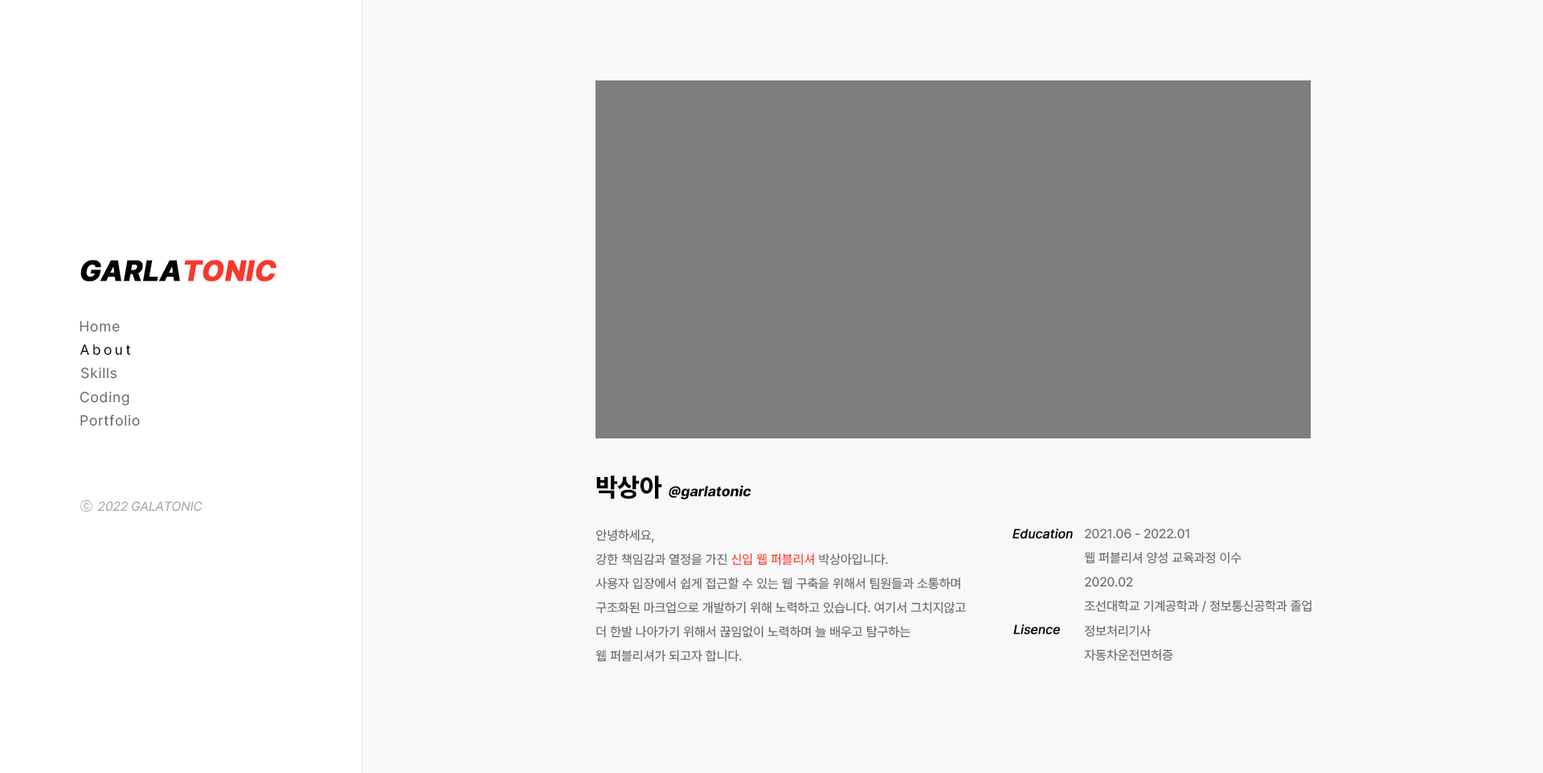
<style>
.page{position:relative;width:1543px;height:773px;background:#f8f8f8}
.page>*{position:absolute;margin:0}
.t1{font:28.9px "Pretendard-ExtraBold";color:#000000;font-weight:bold;font-style:italic}
.t2{font:28.9px "Pretendard-ExtraBold";color:#f9372d;font-weight:bold;font-style:italic}
.t3{font:14.5px "Pretendard-Regular";letter-spacing:0.05em;color:#666666}
.t4{font:14.5px "Pretendard-Regular";letter-spacing:0.2em;color:#000000}
.t5{font:14.5px "Pretendard-ExtraBold";color:#000000;font-style:italic}
.t6{font:25.7px "Pretendard-ExtraBold";color:#000000}
.t7{font:12.9px "Pretendard-Regular";color:#aaaaaa;font-style:italic}
.t8{font:12.9px "Gulim";color:#aaaaaa}
.t9{font:12.9px/24.1px "Pretendard-Regular";color:#666666}
.t10{font:12.9px/24.1px "Pretendard-Regular";color:#f9372d}
.t11{font:12.9px "Pretendard-Regular";color:#000000;font-weight:bold;font-style:italic}
</style>
<div class="page">
<p class="t1" style="left:80px;top:260px;width:197px;height:21px">GARLA<span class="t2">TONIC</span></p>
<p class="t3" style="left:80px;top:321px;width:40px;height:11px">Home</p>
<p class="t4" style="left:80px;top:344px;width:51px;height:11px">About</p>
<p class="t3" style="left:81px;top:367px;width:36px;height:12px">Skills</p>
<p class="t3" style="left:80px;top:391px;width:49px;height:14px">Coding</p>
<p class="t3" style="left:80px;top:414px;width:60px;height:12px">Portfolio</p>
<p class="t5" style="left:596px;top:475px;width:156px;height:24px"><span class="t6">박상아 </span>@garlatonic</p>
<p class="t7" style="left:80px;top:500px;width:123px;height:11px"><span class="t8">ⓒ </span>2022 GALATONIC</p>
<p class="t9" style="left:596px;top:529px;width:370px;height:133px">안녕하세요,<br>강한 책임감과 열정을 가진 <span class="t10">신입 웹 퍼블리셔</span> 박상아입니다.<br>사용자 입장에서 쉽게 접근할 수 있는 웹 구축을 위해서 팀원들과 소통하며<br>구조화된 마크업으로 개발하기 위해 노력하고 있습니다. 여기서 그치지않고<br>더 한발 나아가기 위해서 끊임없이 노력하며 늘 배우고 탐구하는<br>웹 퍼블리셔가 되고자 합니다.</p>
<p class="t11" style="left:1013px;top:528px;width:60px;height:11px">Education</p>
<p class="t9" style="left:1084px;top:528px;width:228px;height:84px">2021.06 - 2022.01<br>웹 퍼블리셔 양성 교육과정 이수<br>2020.02<br>조선대학교 기계공학과 / 정보통신공학과 졸업</p>
<p class="t11" style="left:1014px;top:624px;width:46px;height:10px">Lisence</p>
<p class="t9" style="left:1084px;top:625px;width:90px;height:36px">정보처리기사<br>자동차운전면허증</p>
</div>
